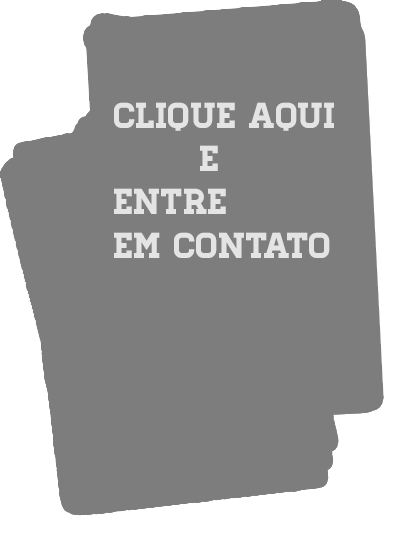
<style>
.page{position:relative;width:399px;height:536px;background:#7d7d7d}
.page>*{position:absolute;margin:0}
.t1{font:36px "Homestead-Regular";color:#e4e4e4}
</style>
<div class="page">
<p class="t1" style="left:114px;top:102px;width:220px;height:156px">Clique Aqui <br>       e <br>entre <br>em contato</p>
</div>
